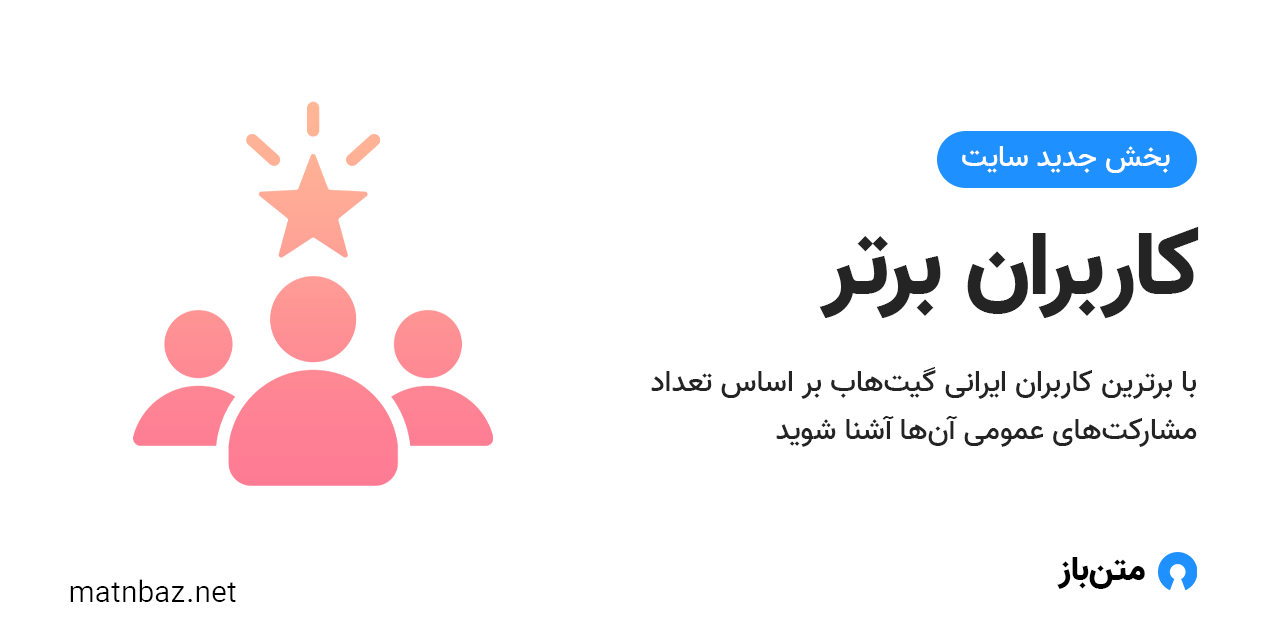
<style>
.page{position:relative;width:1280px;height:640px;background:#ffffff}
.page>*{position:absolute;margin:0}
.t1{font:30px "Vazir-Medium";color:#ffffff}
.t2{font:90px "Vazir-Black";color:#242424}
.t3{font:30px/48px "Vazir-Medium";color:#242424}
.t4{font:34.2px "Vazir-Black";color:#000000}
.t5{font:30px "Vazir-Light";color:#000000}
</style>
<div class="page">
<p class="t1" style="left:962px;top:146px;width:208px;height:27px">بخش جدید سایت</p>
<p class="t2" style="left:819px;top:226px;width:380px;height:93px">کاربران برتر</p>
<p class="t3" style="left:651px;top:366px;width:546px;height:81px;text-align:right">با برترین کاربران ایرانی گیت‌هاب بر اساس تعداد مشارکت‌های عمومی آن‌ها آشنا شوید</p>
<p class="t4" style="left:1057px;top:557px;width:88px;height:32px">متن‌باز</p>
<p class="t5" style="left:70px;top:579px;width:166px;height:23px">matnbaz.net</p>
</div>
